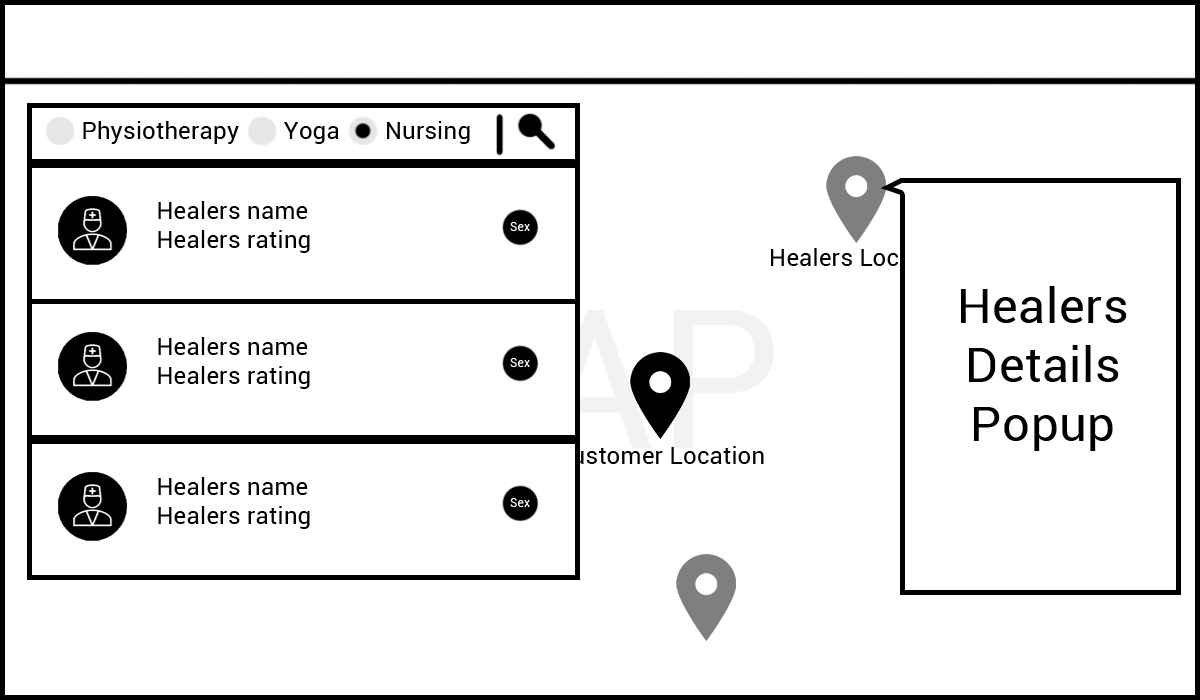
<style>
.page{position:relative;width:1200px;height:700px;background:#ffffff}
.page>*{position:absolute;margin:0}
.t1{font:24px "Roboto-Regular";letter-spacing:0.01em;color:#000000}
.t2{font:12px "Roboto-Regular";letter-spacing:0.01em;color:#ffffff}
.t3{font:49.1px "Roboto-Regular";letter-spacing:0.01em;color:#000000}
</style>
<div class="page">
<p class="t1" style="left:83px;top:121px;width:156px;height:23px">Physiotherapy</p>
<p class="t1" style="left:284px;top:122px;width:55px;height:22px">Yoga</p>
<p class="t1" style="left:387px;top:121px;width:83px;height:23px">Nursing</p>
<p class="t1" style="left:158px;top:201px;width:152px;height:52px">Healers name<br>Healers rating</p>
<p class="t2" style="left:510px;top:222px;width:20px;height:9px">Sex</p>
<p class="t1" style="left:771px;top:248px;width:183px;height:18px">Healers Location</p>
<p class="t3" style="left:961px;top:286px;width:166px;height:165px;text-align:center">Healers<br>Details<br>Popup</p>
<p class="t1" style="left:158px;top:337px;width:152px;height:52px">Healers name<br>Healers rating</p>
<p class="t2" style="left:510px;top:358px;width:20px;height:9px">Sex</p>
<p class="t1" style="left:557px;top:446px;width:207px;height:18px">Customer Location</p>
<p class="t1" style="left:158px;top:477px;width:152px;height:52px">Healers name<br>Healers rating</p>
<p class="t2" style="left:510px;top:498px;width:20px;height:9px">Sex</p>
</div>
